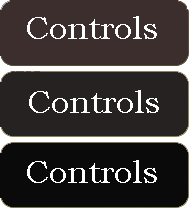
<style>
.page{position:relative;width:193px;height:213px;background:#3d2e2e}
.page>*{position:absolute;margin:0}
.t1{font:32px "BookmanOldStyle";color:#ffffff}
</style>
<div class="page">
<p class="t1" style="left:27px;top:16px;width:130px;height:23px">Controls</p>
<p class="t1" style="left:29px;top:90px;width:130px;height:23px">Controls</p>
<p class="t1" style="left:27px;top:160px;width:130px;height:23px">Controls</p>
</div>
